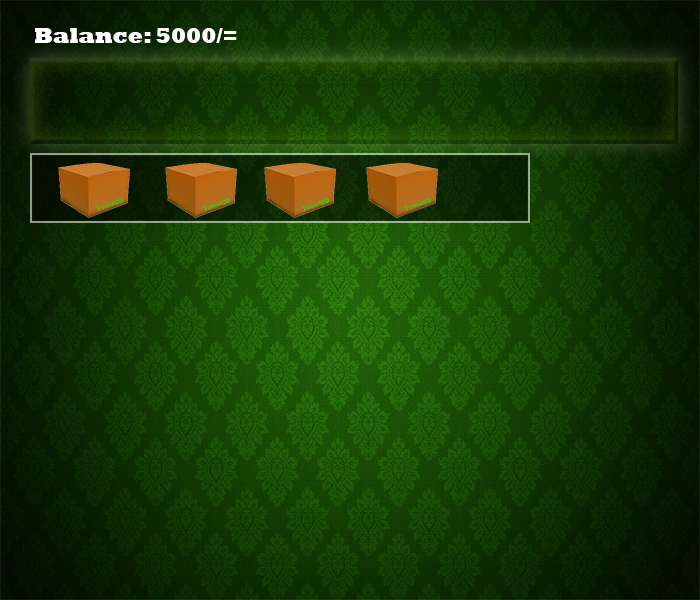
<style>
.page{position:relative;width:700px;height:600px}
.page>*{position:absolute;margin:0}
.t1{font:22.1px "Rockwell-ExtraBold";color:#ffffff}
</style>
<div class="page">
<p class="t1" style="left:35px;top:28px;width:202px;height:15px">Balance: 5000/=</p>
</div>
